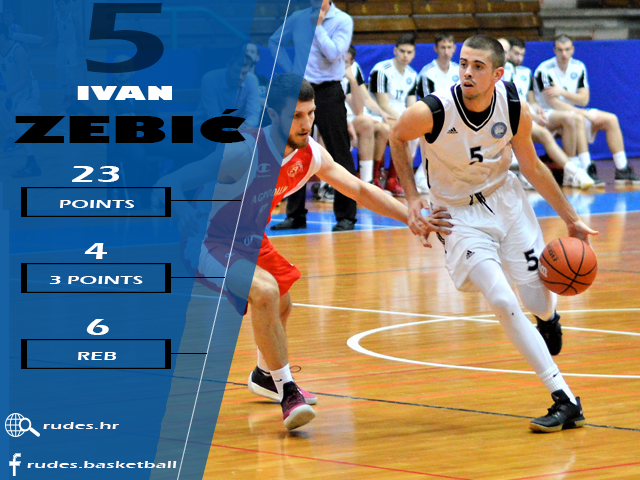
<style>
.page{position:relative;width:640px;height:480px}
.page>*{position:absolute;margin:0}
.t1{font:103px "ErasITC-Demi";color:#02274c;scale:1.55 1}
.t2{font:36px "GillSans-UltraBold";color:#010000;scale:1.77 1}
.t3{font:18px "GillSans-UltraBold";color:#fefefe;scale:1.77 1}
.t4{font:24px "ErasITC-Demi";color:#fefefe;scale:1.77 1}
.t5{font:12px "ErasITC-Demi";color:#fefefe;scale:1.77 1}
.t6{font:11px "ErasITC-Demi";color:#fcf6f6;scale:1.77 1}
</style>
<div class="page">
<p class="t1" style="left:85px;top:3px;width:79px;height:70px">5</p>
<p class="t2" style="left:14px;top:86px;width:232px;height:57px;text-align:center"><span class="t3">IVAN <br></span>ZEBIĆ</p>
<p class="t4" style="left:72px;top:166px;width:47px;height:16px">23</p>
<p class="t5" style="left:60px;top:200px;width:74px;height:8px">POINTS</p>
<p class="t4" style="left:84px;top:243px;width:23px;height:16px">4</p>
<p class="t5" style="left:49px;top:276px;width:94px;height:8px">3 POINTS</p>
<p class="t4" style="left:86px;top:319px;width:23px;height:16px">6</p>
<p class="t5" style="left:78px;top:352px;width:38px;height:8px">REB</p>
<p class="t6" style="left:43px;top:422px;width:76px;height:7px">rudes.hr</p>
<p class="t6" style="left:27px;top:461px;width:150px;height:7px">rudes.basketball</p>
</div>
